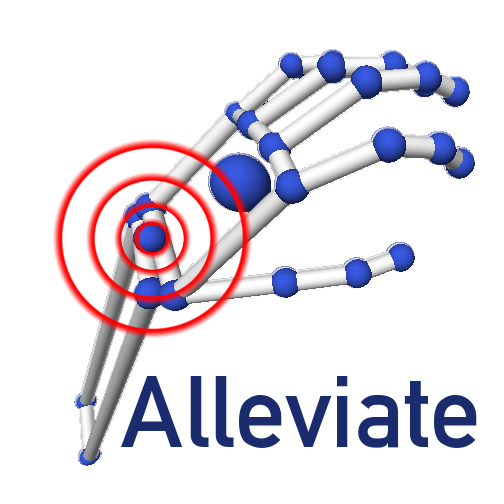
<style>
.page{position:relative;width:504px;height:504px;background:#ffffff}
.page>*{position:absolute;margin:0}
.t1{font:106.7px "Roadgeek2005Mittelschrift";color:#1b2c6e}
</style>
<div class="page">
<p class="t1" style="left:121px;top:376px;width:356px;height:72px">Alleviate</p>
</div>
